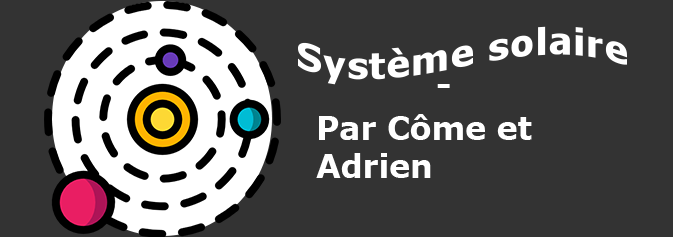
<style>
.page{position:relative;width:673px;height:237px;background:#333333}
.page>*{position:absolute;margin:0}
.t1{font:37.3px "Verdana-Bold";color:#ffffff}
.t2{font:31.6px "Verdana-Bold";color:#ffffff}
</style>
<div class="page">
<p class="t1" style="left:298px;top:26px;width:329px;height:59px">Système solaire</p>
<p class="t2" style="left:437px;top:84px;width:13px;height:4px">-</p>
<p class="t2" style="left:316px;top:114px;width:216px;height:64px">Par Côme et <br>Adrien</p>
</div>
